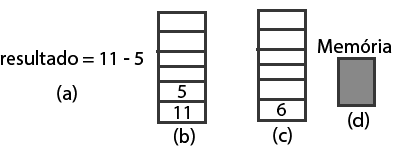
<style>
.page{position:relative;width:407px;height:148px;background:#ffffff}
.page>*{position:absolute;margin:0}
.t1{font:20px "MyriadHebrew-Regular";color:#000000}
</style>
<div class="page">
<p class="t1" style="left:318px;top:39px;width:74px;height:14px">Memória</p>
<p class="t1" style="left:0px;top:50px;width:143px;height:15px">resultado = 11 - 5</p>
<p class="t1" style="left:57px;top:85px;width:20px;height:18px">(a)</p>
<p class="t1" style="left:177px;top:85px;width:9px;height:13px">5</p>
<p class="t1" style="left:174px;top:106px;width:15px;height:13px">11</p>
<p class="t1" style="left:277px;top:103px;width:9px;height:13px">6</p>
<p class="t1" style="left:348px;top:112px;width:21px;height:18px">(d)</p>
<p class="t1" style="left:174px;top:128px;width:21px;height:18px">(b)</p>
<p class="t1" style="left:273px;top:127px;width:19px;height:18px">(c)</p>
</div>
